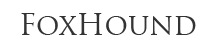
<style>
.page{position:relative;width:220px;height:50px;background:#ffffff}
.page>*{position:absolute;margin:0}
.t1{font:29px "TrajanPro-Regular";color:#333333}
</style>
<div class="page">
<p class="t1" style="left:21px;top:13px;width:175px;height:22px">FoxHound</p>
</div>
